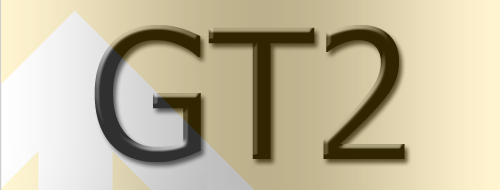
<style>
.page{position:relative;width:500px;height:190px}
.page>*{position:absolute;margin:0}
.t1{font:180px "Tahoma"}
</style>
<div class="page">
<p class="t1" style="left:94px;top:24px;width:311px;height:138px">GT2</p>
</div>
